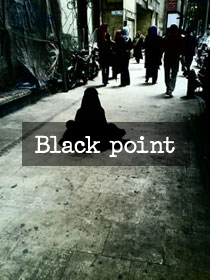
<style>
.page{position:relative;width:210px;height:280px}
.page>*{position:absolute;margin:0}
.t1{font:22px "Passport";color:#ffffff}
</style>
<div class="page">
<p class="t1" style="left:35px;top:135px;width:140px;height:23px">Black point</p>
</div>
